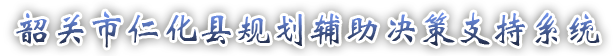
<style>
.page{position:relative;width:616px;height:56px;background:#ffffff}
.page>*{position:absolute;margin:0}
.t1{font:38px "STXinwei";scale:0.96 1}
</style>
<div class="page">
<p class="t1" style="left:16px;top:11px;width:584px;height:37px">韶关市仁化县规划辅助决策支持系统</p>
</div>
